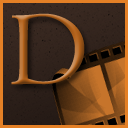
<style>
.page{position:relative;width:128px;height:128px}
.page>*{position:absolute;margin:0}
.t1{font:110px "Centaur"}
</style>
<div class="page">
<p class="t1" style="left:11px;top:13px;width:74px;height:72px">D</p>
</div>
